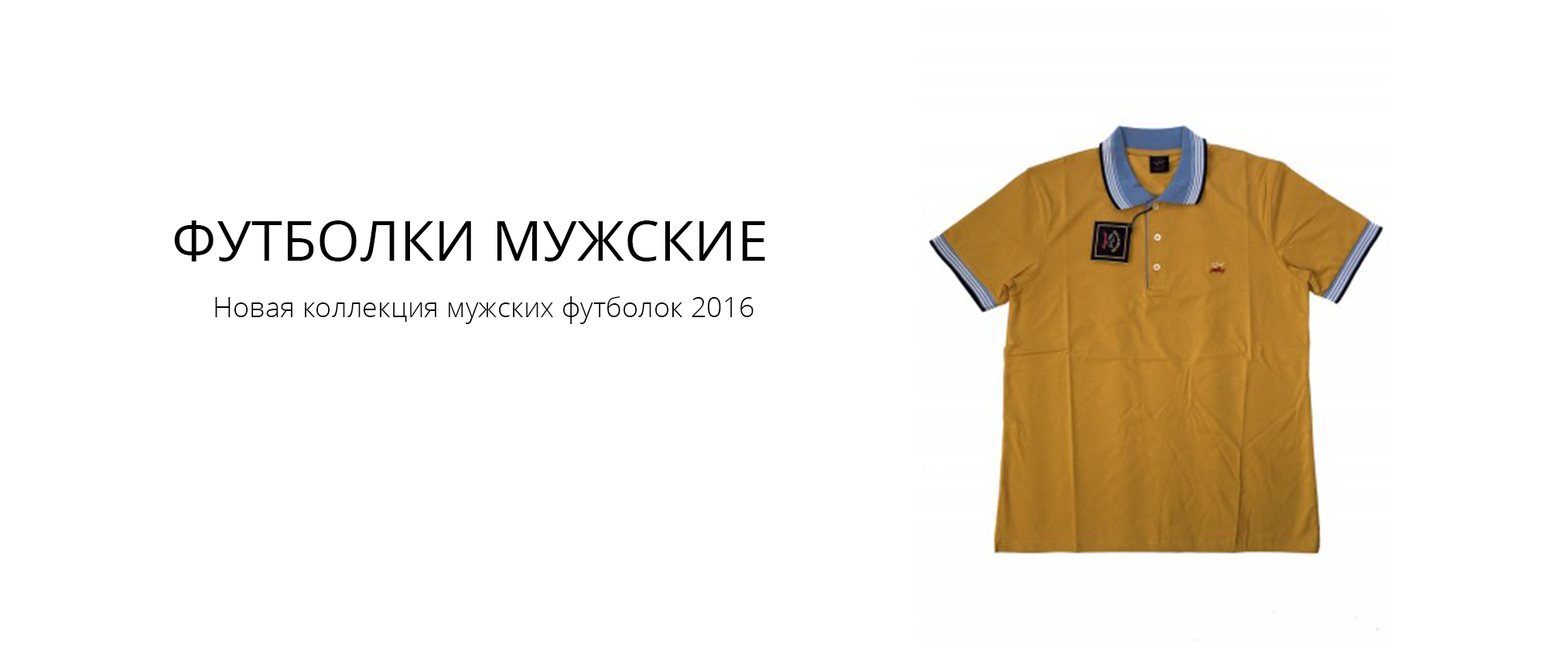
<style>
.page{position:relative;width:1568px;height:656px;background:#ffffff}
.page>*{position:absolute;margin:0}
.t1{font:55.7px "OpenSans";letter-spacing:0.005em;color:#000000}
.t2{font:27.8px "OpenSans-Light";letter-spacing:0.005em;color:#000000}
</style>
<div class="page">
<p class="t1" style="left:174px;top:220px;width:591px;height:41px">ФУТБОЛКИ МУЖСКИЕ</p>
<p class="t2" style="left:215px;top:296px;width:538px;height:28px">Новая коллекция мужских футболок 2016</p>
</div>
